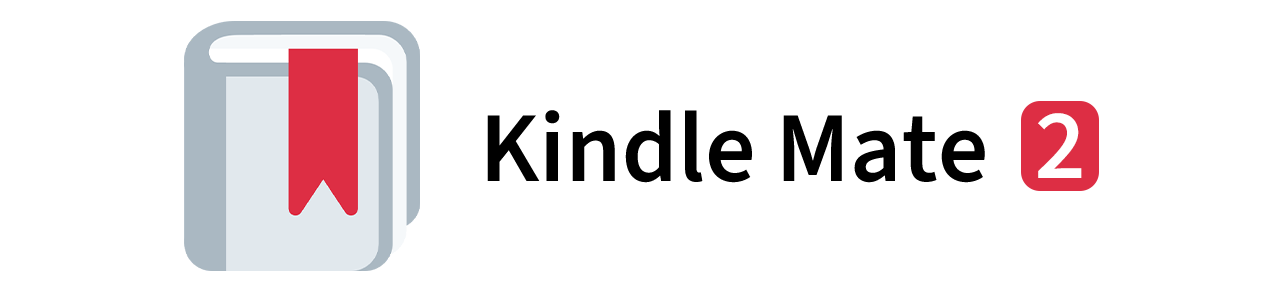
<style>
.page{position:relative;width:1280px;height:292px;background:#ffffff}
.page>*{position:absolute;margin:0}
.t1{font:100px "SourceSans3Roman-Semibold";color:#000000}
.t2{font:100px "SourceSans3Roman-Semibold";color:#ffffff}
</style>
<div class="page">
<p class="t1" style="left:487px;top:110px;width:498px;height:73px">Kindle Mate</p>
<p class="t2" style="left:1038px;top:113px;width:44px;height:65px">2</p>
</div>
